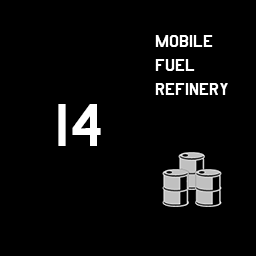
<style>
.page{position:relative;width:256px;height:256px;background:#000000}
.page>*{position:absolute;margin:0}
.t1{font:20px "AmarilloUSAF";color:#ffffff}
.t2{font:70px "AmarilloUSAF";color:#ffffff}
</style>
<div class="page">
<p class="t1" style="left:155px;top:35px;width:73px;height:60px">mobile<br>fuel<br>refinery</p>
<p class="t2" style="left:58px;top:104px;width:43px;height:42px">14</p>
</div>
